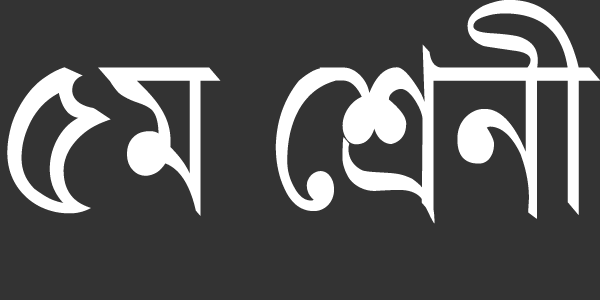
<style>
.page{position:relative;width:600px;height:300px;background:#333333}
.page>*{position:absolute;margin:0}
.t1{font:229.5px "KalpurushANSI";color:#ffffff;scale:0.86 1}
</style>
<div class="page">
<p class="t1" style="left:7px;top:0px;width:594px;height:224px">5g †kÖbx</p>
</div>
